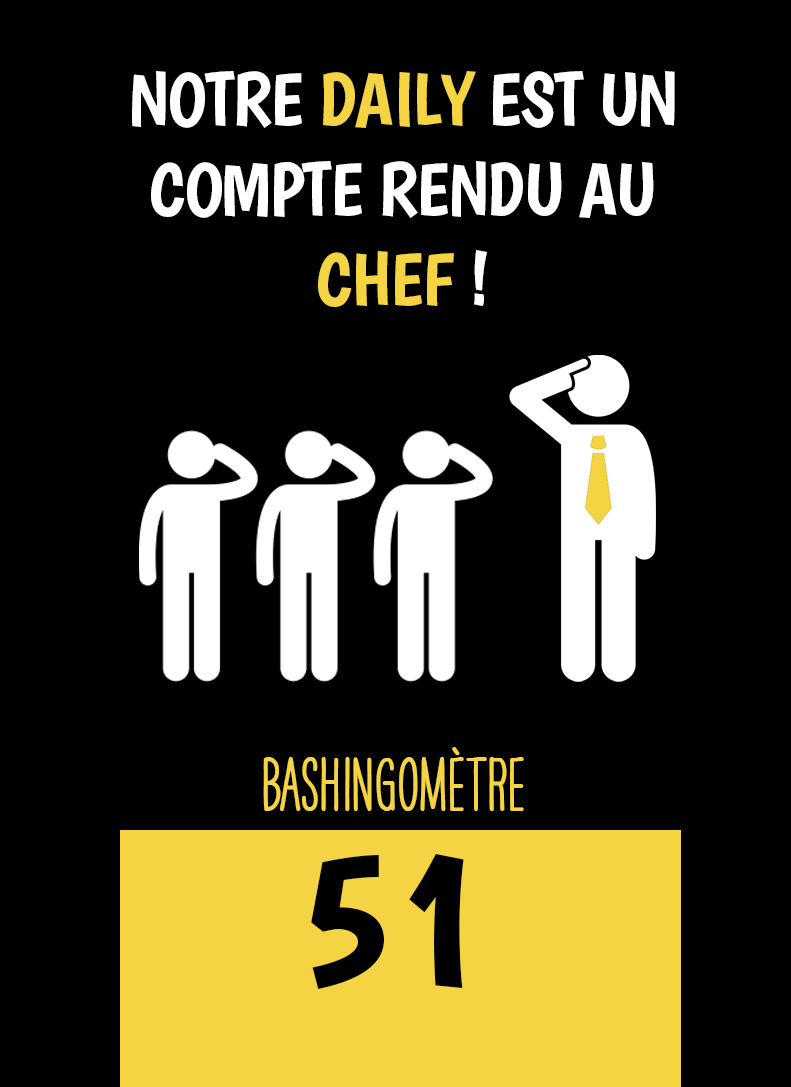
<style>
.page{position:relative;width:791px;height:1087px;background:#000000}
.page>*{position:absolute;margin:0}
.t1{font:75px "Boogaloo-Regular";letter-spacing:-0.02em;color:#ffffff}
.t2{font:75px "Boogaloo-Regular";letter-spacing:-0.02em;color:#f4d443}
.t3{font:66.7px "HAVEANICEDAYTallW04-Bold";color:#f4d443}
.t4{font:200px "Boogaloo-Regular";color:#000000}
</style>
<div class="page">
<p class="t1" style="left:132px;top:71px;width:543px;height:236px;text-align:center">NOTRE <span class="t2">DAILY </span>EST UN COMPTE RENDU AU <span class="t2">CHEF </span>!</p>
<p class="t3" style="left:263px;top:747px;width:261px;height:64px">BASHINgomètre</p>
<p class="t4" style="left:311px;top:854px;width:153px;height:135px">51</p>
</div>
